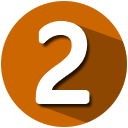
<style>
.page{position:relative;width:128px;height:128px;background:#ffffff}
.page>*{position:absolute;margin:0}
.t1{font:100px "MicrosoftYaHei";color:#ffffff}
</style>
<div class="page">
<p class="t1" style="left:38px;top:24px;width:49px;height:77px">2</p>
</div>
